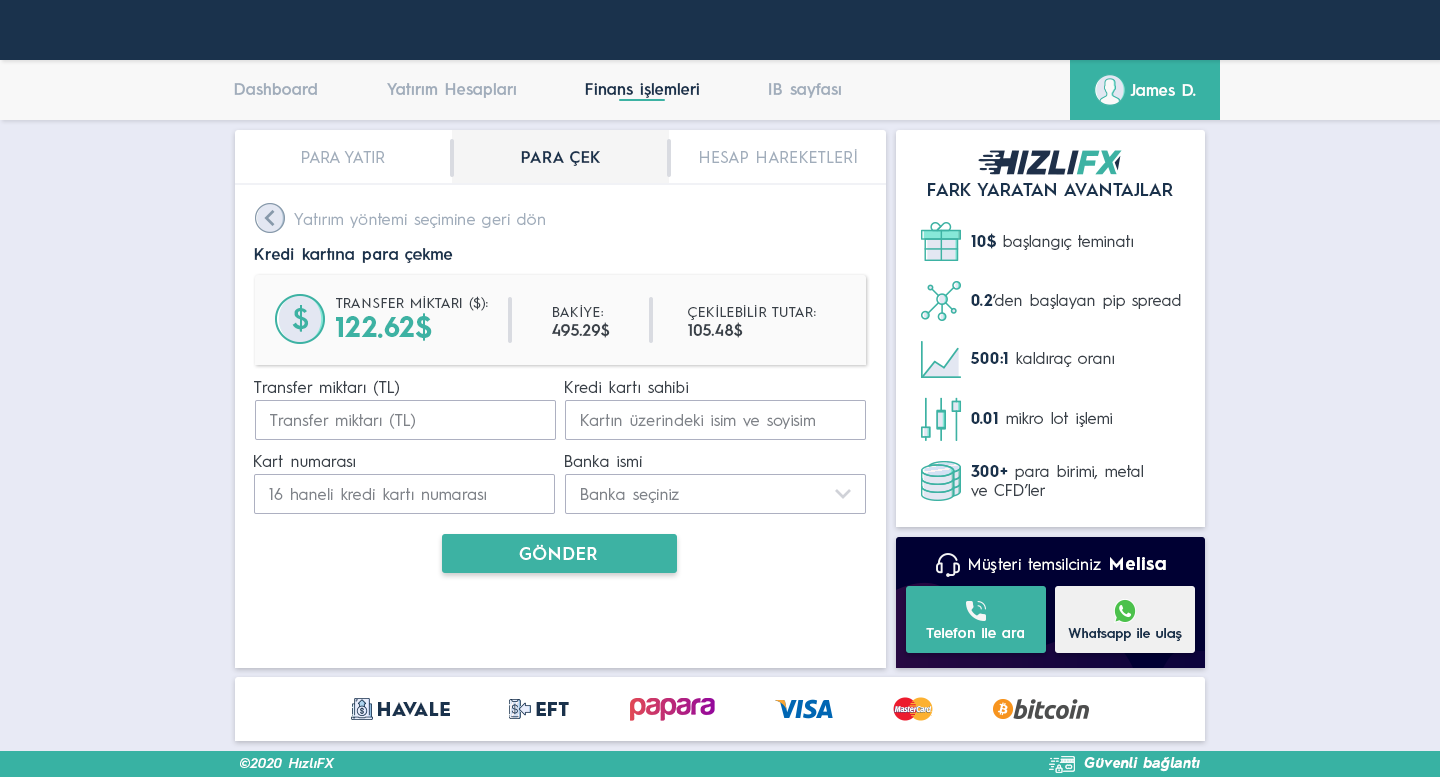
<style>
.page{position:relative;width:1440px;height:777px;background:#ffffff}
.page>*{position:absolute;margin:0}
.t1{font:16px "HurmeGeometricSans3-SemiBold";color:#a1adbb}
.t2{font:16px "HurmeGeometricSans3-SemiBold";color:#1a324c}
.t3{font:16px "HurmeGeometricSans3-SemiBold";color:#fefefe}
.t4{font:16px "HurmeGeometricSans1-Regular";letter-spacing:0.01em;color:#a1adbb}
.t5{font:16px "HurmeGeometricSans1-SemiBold";letter-spacing:0.01em;color:#1a324c}
.t6{font:18px "HurmeGeometricSans1-SemiBold";color:#1a324c}
.t7{font:16px "HurmeGeometricSans1-Regular";color:#3a4149}
.t8{font:16px "HurmeGeometricSans1-Bold";color:#1a324c}
.t9{font:16px "HurmeGeometricSans3-SemiBold";letter-spacing:0.01em;color:#1a324c}
.t10{font:29.2px "HurmeGeometricSans2-SemiBold";letter-spacing:0.01em;color:#3db2a3}
.t11{font:14px "HurmeGeometricSans1-Regular";letter-spacing:0.01em;color:#3a4149}
.t12{font:16px "HurmeGeometricSans1-SemiBold";letter-spacing:0.01em;color:#3a4149}
.t13{font:28px "HurmeGeometricSans1-Bold";letter-spacing:0.01em;color:#3db2a3}
.t14{font:16px "HurmeGeometricSans1-Regular";letter-spacing:0.01em;color:#3a4149}
.t15{font:16px "HurmeGeometricSans1-Regular";letter-spacing:0.01em;color:#7f8389}
.t16{font:18px "HurmeGeometricSans1-SemiBold";letter-spacing:0.025em;color:#ffffff}
.t17{font:16px "HurmeGeometricSans1-Regular";letter-spacing:0.025em;color:#ffffff}
.t18{font:18px "HurmeGeometricSans1-Bold";letter-spacing:0.05em;color:#ffffff}
.t19{font:14px "HurmeGeometricSans3-SemiBold";letter-spacing:0.01em;color:#ffffff}
.t20{font:13.5px "HurmeGeometricSans3-SemiBold";letter-spacing:0.01em;color:#1a324c}
.t21{font:18px "HurmeGeometricSans1-Black";letter-spacing:0.025em;color:#1a324c}
.t22{font:14px "HurmeGeometricSans2-SemiBoldObl";letter-spacing:0.025em;color:#ffffff}
.t23{font:14px "HurmeGeometricSans2-BoldObl";letter-spacing:0.025em;color:#ffffff}
</style>
<div class="page">
<p class="t1" style="left:234px;top:83px;width:83px;height:12px">Dashboard</p>
<p class="t1" style="left:387px;top:83px;width:129px;height:15px">Yatırım Hesapları</p>
<p class="t2" style="left:585px;top:83px;width:114px;height:15px">Finans işlemleri</p>
<p class="t1" style="left:769px;top:83px;width:72px;height:15px">IB sayfası</p>
<p class="t3" style="left:1130px;top:84px;width:66px;height:12px">James D.</p>
<p class="t4" style="left:700px;top:149px;width:157px;height:14px">HESAP HAREKETLERİ</p>
<p class="t4" style="left:302px;top:151px;width:83px;height:12px">PARA YATIR</p>
<p class="t5" style="left:521px;top:151px;width:79px;height:15px">PARA ÇEK</p>
<p class="t6" style="left:928px;top:183px;width:245px;height:13px">FARK YARATAN AVANTAJLAR</p>
<p class="t4" style="left:294px;top:213px;width:251px;height:15px">Yatırım yöntemi seçimine geri dön</p>
<p class="t7" style="left:971px;top:233px;width:162px;height:17px"><span class="t8">10$</span> başlangıç teminatı</p>
<p class="t9" style="left:254px;top:248px;width:199px;height:15px">Kredi kartına para çekme</p>
<p class="t7" style="left:971px;top:294px;width:210px;height:15px"><span class="t8">0.2</span>‘den başlayan pip spread</p>
<p class="t10" style="left:292px;top:305px;width:17px;height:27px">$</p>
<p class="t11" style="left:336px;top:296px;width:152px;height:15px">TRANSFER MİKTARI ($):</p>
<p class="t11" style="left:552px;top:305px;width:58px;height:33px">BAKİYE:<br><span class="t12">495.29$</span></p>
<p class="t11" style="left:688px;top:305px;width:128px;height:33px">ÇEKİLEBİLİR TUTAR:<br><span class="t12">105.48$</span></p>
<p class="t13" style="left:336px;top:313px;width:96px;height:28px">122.62$</p>
<p class="t7" style="left:970px;top:352px;width:144px;height:15px"><span class="t8">500:1</span> kaldıraç oranı</p>
<p class="t14" style="left:254px;top:380px;width:145px;height:16px">Transfer miktarı (TL)</p>
<p class="t14" style="left:565px;top:381px;width:123px;height:12px">Kredi kartı sahibi</p>
<p class="t15" style="left:270px;top:413px;width:145px;height:16px">Transfer miktarı (TL)</p>
<p class="t15" style="left:581px;top:414px;width:234px;height:15px">Kartın üzerindeki isim ve soyisim</p>
<p class="t7" style="left:971px;top:412px;width:141px;height:15px"><span class="t8">0.01</span> mikro lot işlemi</p>
<p class="t14" style="left:254px;top:455px;width:101px;height:12px">Kart numarası</p>
<p class="t14" style="left:565px;top:455px;width:77px;height:12px">Banka ismi</p>
<p class="t7" style="left:971px;top:465px;width:172px;height:32px"><span class="t8">300+</span> para birimi, metal<br>ve CFD’ler</p>
<p class="t15" style="left:269px;top:488px;width:217px;height:12px">16 haneli kredi kartı numarası</p>
<p class="t15" style="left:581px;top:488px;width:98px;height:15px">Banka seçiniz</p>
<p class="t16" style="left:519px;top:544px;width:78px;height:16px">GÖNDER</p>
<p class="t17" style="left:969px;top:557px;width:197px;height:16px">Müşteri temsilciniz <span class="t18">Melisa</span></p>
<p class="t19" style="left:926px;top:628px;width:98px;height:10px">Telefon ile ara</p>
<p class="t20" style="left:1068px;top:628px;width:114px;height:13px">Whatsapp ile ulaş</p>
<p class="t21" style="left:378px;top:702px;width:72px;height:14px">HAVALE</p>
<p class="t21" style="left:536px;top:702px;width:33px;height:14px">EFT</p>
<p class="t22" style="left:240px;top:758px;width:95px;height:10px">©2020 HızlıFX</p>
<p class="t23" style="left:1084px;top:757px;width:116px;height:15px">Güvenli bağlantı</p>
</div>
